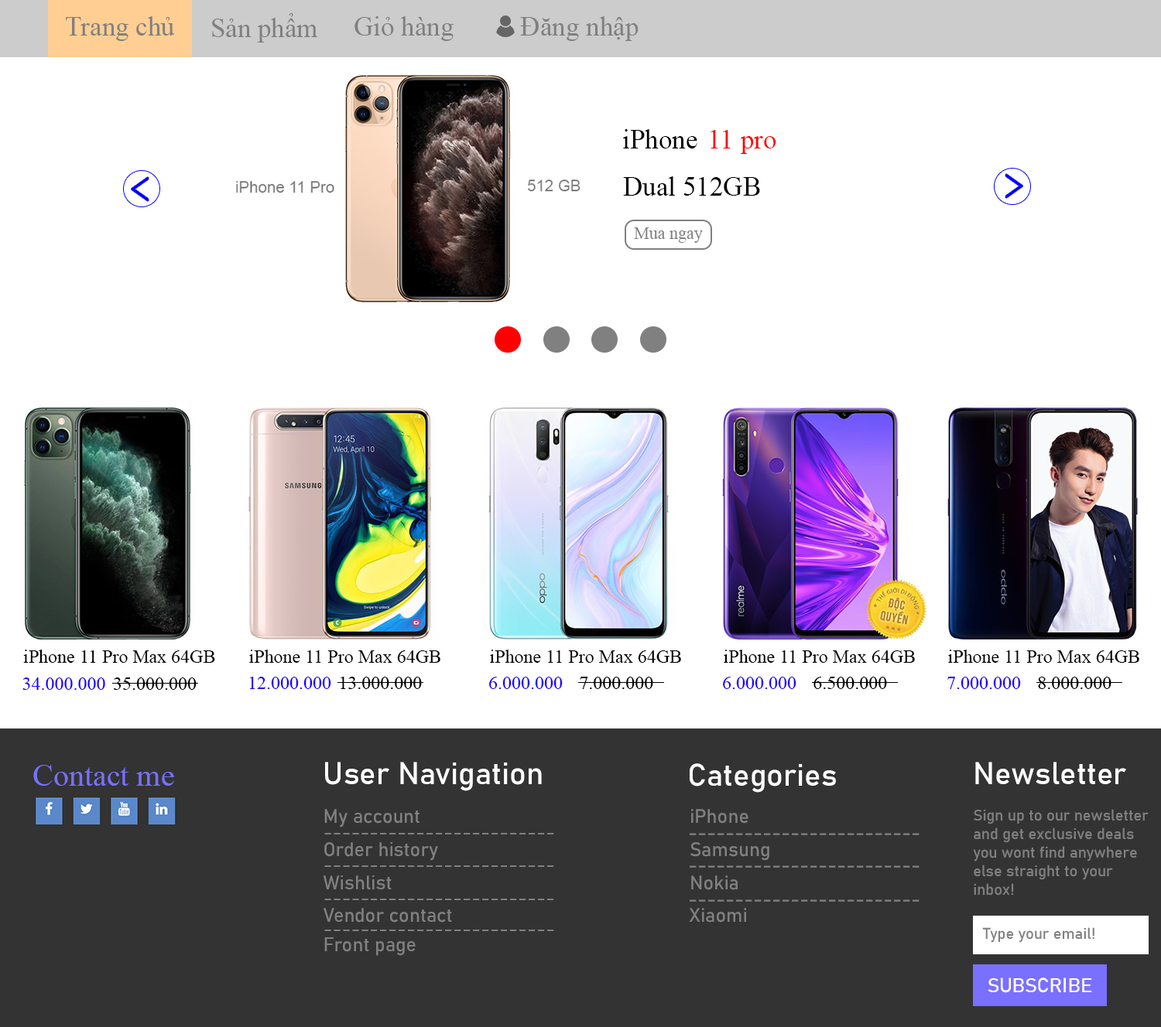
<style>
.page{position:relative;width:1161px;height:1027px;background:#ffffff}
.page>*{position:absolute;margin:0}
.t1{font:27.1px "TimesNewRomanPSMT";color:#808080}
.t2{font:26.9px "TimesNewRomanPSMT";color:#000000}
.t3{font:26.9px "TimesNewRomanPSMT";color:#ff0000}
.t4{font:48.5px "TimesNewRomanPSMT";color:#0000ff;scale:0.64 1}
.t5{font:17px "TimesNewRomanPSMT";color:#808080}
.t6{font:18.6px "TimesNewRomanPSMT";color:#000000}
.t7{font:18.4px "TimesNewRomanPSMT";color:#000000}
.t8{font:18.6px "TimesNewRomanPSMT";color:#1e00ff}
.t9{font:18.4px "TimesNewRomanPSMT";color:#1e00ff}
.t10{font:30.9px "TimesNewRomanPSMT";color:#7a70ff}
.t11{font:30.9px "Bahnschrift";color:#ffffff}
.t12{font:19.3px "Bahnschrift";color:#808080}
.t13{font:19.4px "Bahnschrift";color:#808080}
.t14{font:15.5px "Bahnschrift";color:#808080}
.t15{font:20.1px "Bahnschrift";color:#ffffff}
</style>
<div class="page">
<p class="t1" style="left:66px;top:16px;width:109px;height:25px">Trang chủ</p>
<p class="t1" style="left:212px;top:13px;width:106px;height:30px">Sản phẩm</p>
<p class="t1" style="left:354px;top:16px;width:99px;height:25px">Giỏ hàng</p>
<p class="t1" style="left:520px;top:16px;width:118px;height:25px">Đăng nhập</p>
<p class="t2" style="left:623px;top:129px;width:74px;height:20px">iPhone</p>
<p class="t3" style="left:710px;top:130px;width:66px;height:24px">11 pro</p>
<p class="t4" style="left:132px;top:177px;width:17px;height:24px;rotate:180deg">&gt;</p>
<p class="t2" style="left:623px;top:176px;width:137px;height:20px">Dual 512GB</p>
<p class="t4" style="left:1005px;top:174px;width:17px;height:24px">&gt;</p>
<p class="t5" style="left:634px;top:227px;width:69px;height:16px">Mua ngay</p>
<p class="t6" style="left:23px;top:650px;width:192px;height:13px">iPhone 11 Pro Max 64GB</p>
<p class="t7" style="left:249px;top:650px;width:191px;height:13px">iPhone 11 Pro Max 64GB</p>
<p class="t7" style="left:490px;top:650px;width:191px;height:13px">iPhone 11 Pro Max 64GB</p>
<p class="t7" style="left:723px;top:650px;width:192px;height:13px">iPhone 11 Pro Max 64GB</p>
<p class="t7" style="left:948px;top:650px;width:191px;height:13px">iPhone 11 Pro Max 64GB</p>
<p class="t8" style="left:22px;top:678px;width:83px;height:12px">34.000.000</p>
<p class="t6" style="left:114px;top:678px;width:83px;height:12px">35.000.000</p>
<p class="t9" style="left:249px;top:677px;width:82px;height:12px">12.000.000</p>
<p class="t7" style="left:340px;top:677px;width:82px;height:12px">13.000.000</p>
<p class="t9" style="left:489px;top:677px;width:73px;height:12px">6.000.000</p>
<p class="t7" style="left:580px;top:677px;width:73px;height:12px">7.000.000</p>
<p class="t9" style="left:723px;top:677px;width:73px;height:12px">6.000.000</p>
<p class="t7" style="left:813px;top:677px;width:74px;height:12px">6.500.000</p>
<p class="t9" style="left:947px;top:677px;width:74px;height:12px">7.000.000</p>
<p class="t7" style="left:1038px;top:677px;width:73px;height:12px">8.000.000</p>
<p class="t10" style="left:33px;top:765px;width:141px;height:21px">Contact me</p>
<p class="t11" style="left:325px;top:762px;width:217px;height:29px">User Navigation</p>
<p class="t11" style="left:689px;top:764px;width:147px;height:29px">Categories</p>
<p class="t11" style="left:975px;top:762px;width:151px;height:23px">Newsletter</p>
<p class="t12" style="left:324px;top:809px;width:95px;height:19px">My account</p>
<p class="t13" style="left:691px;top:809px;width:57px;height:15px">iPhone</p>
<p class="t14" style="left:973px;top:809px;width:175px;height:87px">Sign up to our newsletter<br>and get exclusive deals <br>you wont find anywhere <br>else straight to your <br>inbox!</p>
<p class="t12" style="left:324px;top:833px;width:230px;height:2px">-------------------------</p>
<p class="t13" style="left:689px;top:833px;width:230px;height:3px">-------------------------</p>
<p class="t12" style="left:324px;top:843px;width:114px;height:18px">Order history</p>
<p class="t13" style="left:690px;top:843px;width:79px;height:18px">Samsung</p>
<p class="t12" style="left:324px;top:866px;width:230px;height:1px">-------------------------</p>
<p class="t13" style="left:689px;top:866px;width:230px;height:2px">-------------------------</p>
<p class="t12" style="left:323px;top:876px;width:68px;height:14px">Wishlist</p>
<p class="t13" style="left:691px;top:876px;width:46px;height:15px">Nokia</p>
<p class="t12" style="left:324px;top:899px;width:230px;height:2px">-------------------------</p>
<p class="t13" style="left:689px;top:900px;width:230px;height:2px">-------------------------</p>
<p class="t12" style="left:323px;top:908px;width:129px;height:15px">Vendor contact</p>
<p class="t13" style="left:689px;top:908px;width:57px;height:15px">Xiaomi</p>
<p class="t12" style="left:324px;top:930px;width:230px;height:2px">-------------------------</p>
<p class="t14" style="left:982px;top:928px;width:112px;height:15px">Type your email!</p>
<p class="t12" style="left:324px;top:938px;width:91px;height:18px">Front page</p>
<p class="t15" style="left:987px;top:978px;width:105px;height:15px">SUBSCRIBE</p>
</div>
